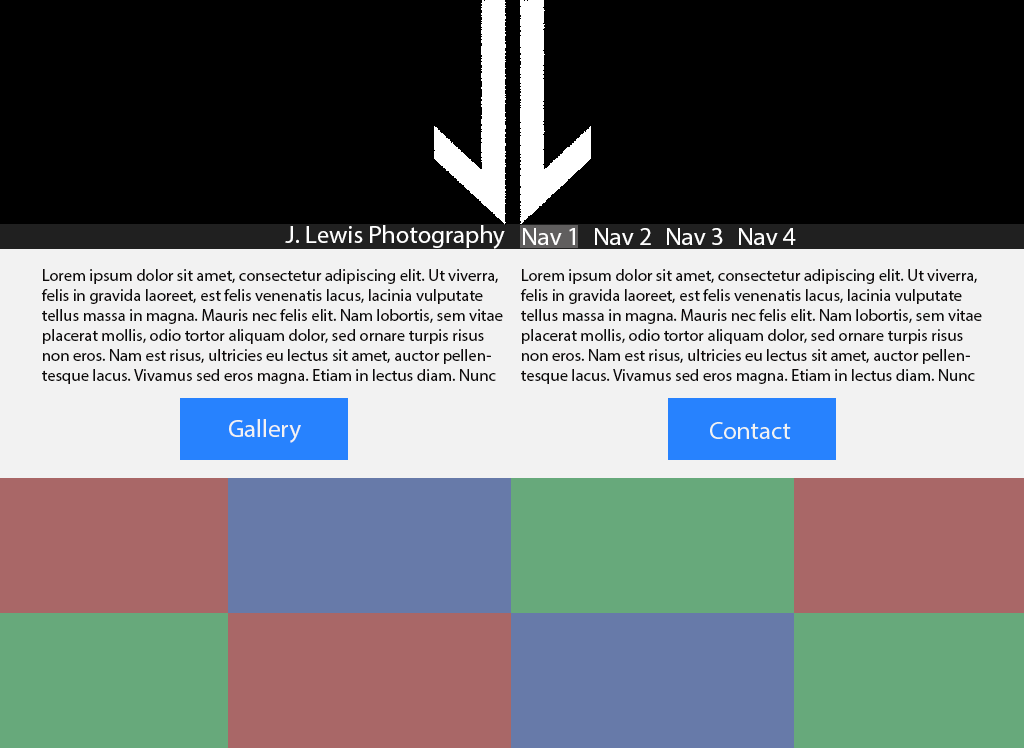
<style>
.page{position:relative;width:1024px;height:748px;background:#000000}
.page>*{position:absolute;margin:0}
.t1{font:25px "MyriadPro-Regular";color:#ffffff}
.t2{font:16.7px "MyriadPro-Regular";color:#0e0b0b}
.t3{font:25px "MyriadPro-Regular";color:#f2f2f2}
</style>
<div class="page">
<p class="t1" style="left:285px;top:225px;width:220px;height:24px">J. Lewis Photography</p>
<p class="t1" style="left:523px;top:228px;width:273px;height:17px">Nav 1 Nav 2 Nav 3 Nav 4</p>
<p class="t2" style="left:41px;top:269px;width:462px;height:115px">Lorem ipsum dolor sit amet, consectetur adipiscing elit. Ut viverra, felis in gravida laoreet, est felis venenatis lacus, lacinia vulputate tellus massa in magna. Mauris nec felis elit. Nam lobortis, sem vitae placerat mollis, odio tortor aliquam dolor, sed ornare turpis risus non eros. Nam est risus, ultricies eu lectus sit amet, auctor pellentesque lacus. Vivamus sed eros magna. Etiam in lectus diam. Nunc nibh libero, fringilla sed facilisis vitae, cursus eget libero.</p>
<p class="t2" style="left:520px;top:269px;width:462px;height:115px">Lorem ipsum dolor sit amet, consectetur adipiscing elit. Ut viverra, felis in gravida laoreet, est felis venenatis lacus, lacinia vulputate tellus massa in magna. Mauris nec felis elit. Nam lobortis, sem vitae placerat mollis, odio tortor aliquam dolor, sed ornare turpis risus non eros. Nam est risus, ultricies eu lectus sit amet, auctor pellentesque lacus. Vivamus sed eros magna. Etiam in lectus diam. Nunc nibh libero, fringilla sed facilisis vitae, cursus eget libero.</p>
<p class="t3" style="left:229px;top:419px;width:72px;height:24px">Gallery</p>
</div>
